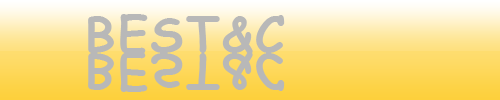
<style>
.page{position:relative;width:500px;height:100px}
.page>*{position:absolute;margin:0}
.t1{font:48px "ComicSansMS-Bold";letter-spacing:0.05em;color:#b8b8b8;font-variant:small-caps}
</style>
<div class="page">
<p class="t1" style="left:88px;top:14px;width:197px;height:40px">BEST&amp;C</p>
</div>
